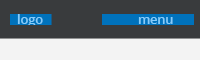
<style>
.page{position:relative;width:200px;height:60px;background:#393b3d}
.page>*{position:absolute;margin:0}
.t1{font:12.5px "OpenSans-Semibold";color:#86ccfa}
</style>
<div class="page">
<p class="t1" style="left:17px;top:14px;width:26px;height:13px">logo</p>
<p class="t1" style="left:138px;top:17px;width:35px;height:7px">menu</p>
</div>
